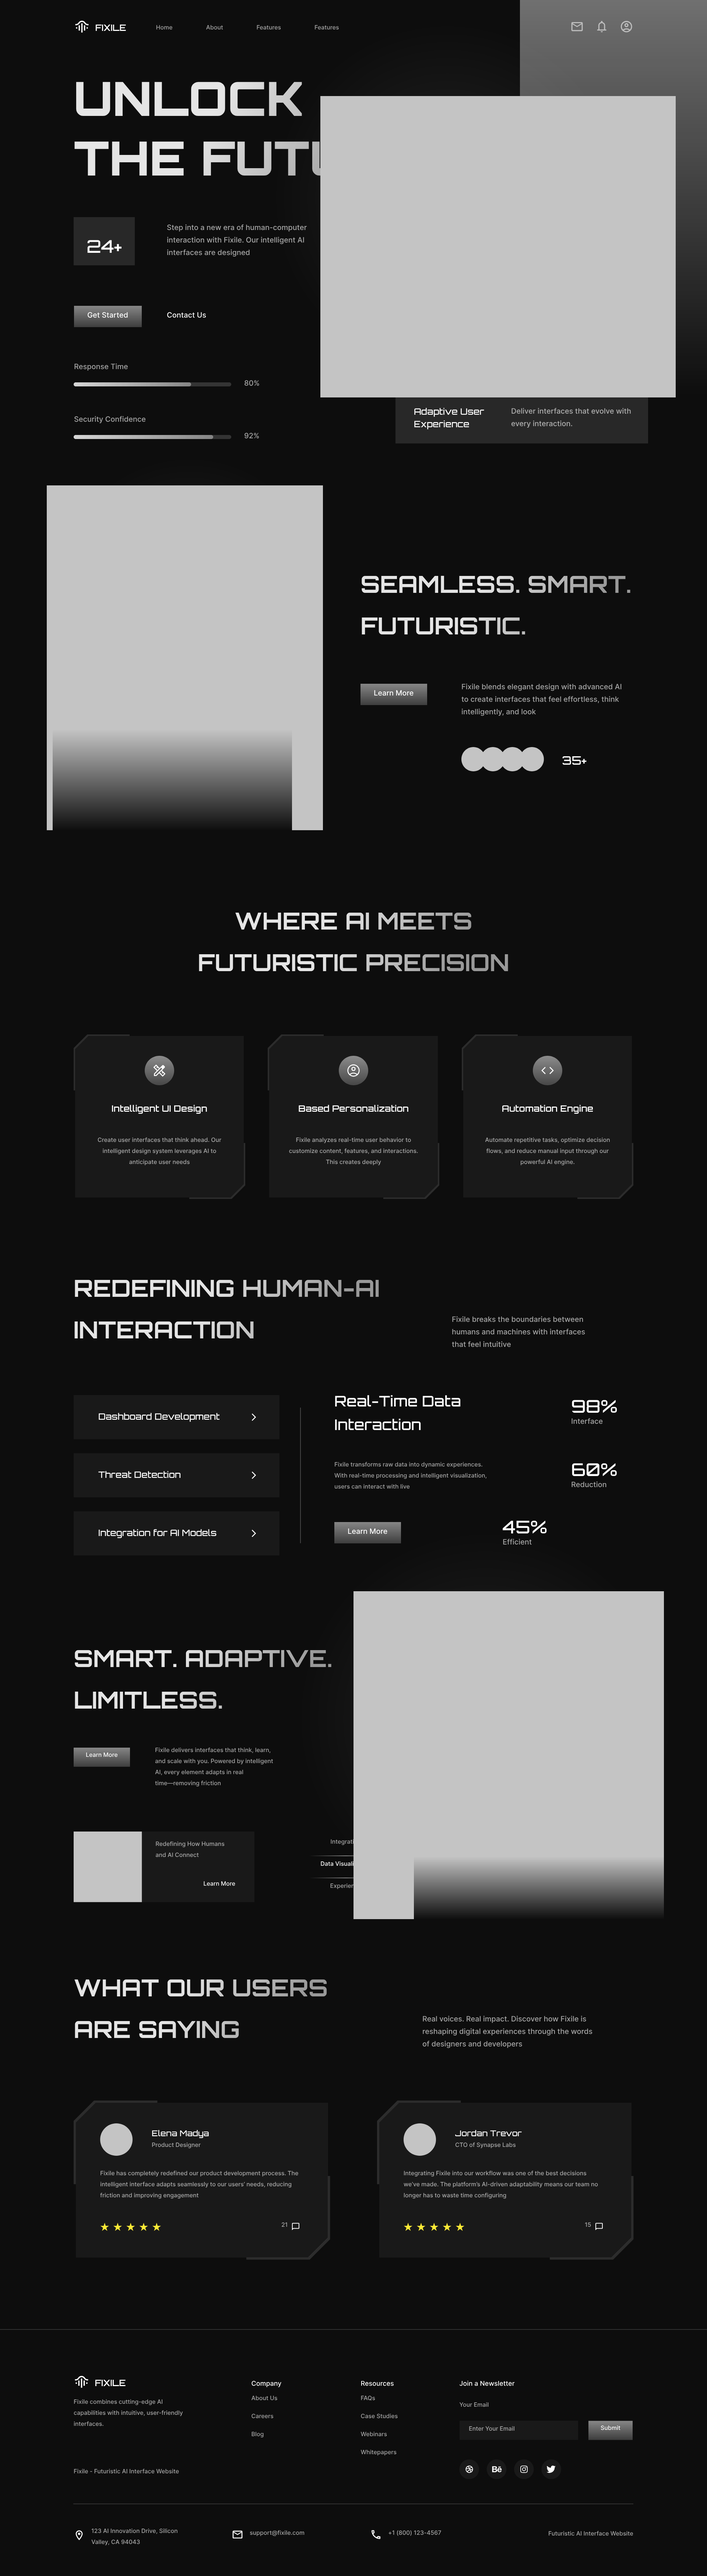
<style>
.page{position:relative;width:707px;height:2576px;background:#0d0d0d}
.page>*{position:absolute;margin:0}
.t1{font:8.8px "Orbitron-SemiBold";color:#ffffff}
.t2{font:5.9px "Inter-Medium";color:#a6a6a6}
.t3{font:47.1px/59.6px "Orbitron-Black";text-transform:uppercase}
.t4{font:7.4px/12.5px "Inter-Medium";color:#a6a6a6}
.t5{font:17.7px "Orbitron-Medium";color:#ffffff}
.t6{font:7.4px "Inter-Medium";color:#ffffff}
.t7{font:7.4px "Inter-Medium";color:#a6a6a6}
.t8{font:8.8px/12.5px "Orbitron-Medium";color:#ffffff}
.t9{font:7.4px/12.5px "Inter-Medium";color:#b0b0b0}
.t10{font:23.6px/41.6px "Orbitron-Bold";text-transform:uppercase}
.t11{font:11.8px "Orbitron-Medium";color:#ffffff}
.t12{font:5.9px/11px "Inter-Medium";color:#aaaaaa}
.t13{font:14.7px/23.6px "Orbitron-Medium";color:#ffffff}
.t14{font:8.8px "Orbitron-Medium";color:#ffffff}
.t15{font:5.9px/11px "Inter-Medium";color:#a6a6a6}
.t16{font:23.6px/41.6px "Orbitron-Bold";color:#e1e1e1;text-transform:uppercase}
.t17{font:5.9px "Inter-Medium";color:#ffffff}
.t18{font:8.1px "Orbitron-Medium";color:#ffffff}
.t19{font:5.9px "Inter-Medium";color:#aaaaaa}
.t20{font:6.6px "Inter-Medium";color:#ffffff}
.t21{font:5.9px/18px "Inter-Medium";color:#a6a6a6}
</style>
<div class="page">
<p class="t1" style="left:95px;top:24px;width:31px;height:7px">FIXILE</p>
<p class="t2" style="left:156px;top:25px;width:16px;height:5px">Home</p>
<p class="t2" style="left:206px;top:25px;width:17px;height:5px">About</p>
<p class="t2" style="left:256px;top:25px;width:25px;height:5px">Features</p>
<p class="t2" style="left:315px;top:25px;width:24px;height:5px">Features</p>
<p class="t3" style="left:74px;top:82px;width:348px;height:94px">Unlock the Future</p>
<p class="t4" style="left:167px;top:224px;width:140px;height:33px">Step into a new era of human-computer interaction with Fixile. Our intelligent AI interfaces are designed</p>
<p class="t5" style="left:87px;top:240px;width:34px;height:13px">24+</p>
<p class="t6" style="left:88px;top:312px;width:40px;height:6px">Get Started</p>
<p class="t6" style="left:167px;top:312px;width:39px;height:6px">Contact Us</p>
<p class="t7" style="left:74px;top:363px;width:54px;height:8px">Response Time</p>
<p class="t7" style="left:244px;top:380px;width:15px;height:6px">80%</p>
<p class="t8" style="left:414px;top:408px;width:70px;height:21px">Adaptive User Experience</p>
<p class="t9" style="left:511px;top:408px;width:119px;height:20px">Deliver interfaces that evolve with every interaction.</p>
<p class="t7" style="left:74px;top:416px;width:72px;height:8px">Security Confidence</p>
<p class="t7" style="left:244px;top:433px;width:15px;height:6px">92%</p>
<p class="t10" style="left:361px;top:576px;width:269px;height:58px">Seamless. Smart. Futuristic.</p>
<p class="t4" style="left:461px;top:683px;width:160px;height:33px">Fixile blends elegant design with advanced AI to create interfaces that feel effortless, think intelligently, and look</p>
<p class="t6" style="left:374px;top:690px;width:39px;height:6px">Learn More</p>
<p class="t11" style="left:562px;top:756px;width:24px;height:9px">35+</p>
<p class="t10" style="left:199px;top:912px;width:309px;height:59px;text-align:center">Where AI Meets Futuristic Precision</p>
<p class="t1" style="left:112px;top:1105px;width:95px;height:9px">Intelligent UI Design</p>
<p class="t1" style="left:298px;top:1105px;width:110px;height:7px">Based Personalization</p>
<p class="t1" style="left:502px;top:1105px;width:90px;height:9px">Automation Engine</p>
<p class="t12" style="left:98px;top:1137px;width:123px;height:28px;text-align:center">Create user interfaces that think ahead. Our intelligent design system leverages AI to anticipate user needs</p>
<p class="t12" style="left:289px;top:1137px;width:129px;height:28px;text-align:center">Fixile analyzes real-time user behavior to customize content, features, and interactions. This creates deeply</p>
<p class="t12" style="left:485px;top:1137px;width:124px;height:28px;text-align:center">Automate repetitive tasks, optimize decision flows, and reduce manual input through our powerful AI engine.</p>
<p class="t10" style="left:74px;top:1280px;width:305px;height:58px">Redefining Human-AI Interaction</p>
<p class="t4" style="left:452px;top:1316px;width:133px;height:31px">Fixile breaks the boundaries between humans and machines with interfaces that feel intuitive</p>
<p class="t13" style="left:335px;top:1395px;width:125px;height:35px">Real-Time Data Interaction</p>
<p class="t5" style="left:572px;top:1400px;width:45px;height:13px">98%</p>
<p class="t14" style="left:99px;top:1413px;width:120px;height:9px">Dashboard Development</p>
<p class="t7" style="left:571px;top:1418px;width:31px;height:6px">Interface</p>
<p class="t15" style="left:334px;top:1462px;width:152px;height:27px">Fixile transforms raw data into dynamic experiences. With real-time processing and intelligent visualization, users can interact with live</p>
<p class="t5" style="left:572px;top:1463px;width:44px;height:13px">60%</p>
<p class="t14" style="left:98px;top:1471px;width:83px;height:7px">Threat Detection</p>
<p class="t7" style="left:571px;top:1481px;width:35px;height:6px">Reduction</p>
<p class="t14" style="left:99px;top:1529px;width:117px;height:9px">Integration for AI Models</p>
<p class="t6" style="left:348px;top:1528px;width:39px;height:6px">Learn More</p>
<p class="t5" style="left:502px;top:1521px;width:44px;height:12px">45%</p>
<p class="t7" style="left:503px;top:1539px;width:28px;height:6px">Efficient</p>
<p class="t16" style="left:75px;top:1650px;width:256px;height:59px">Smart. Adaptive. Limitless.</p>
<p class="t17" style="left:86px;top:1752px;width:31px;height:5px">Learn More</p>
<p class="t15" style="left:155px;top:1747px;width:118px;height:40px">Fixile delivers interfaces that think, learn, and scale with you. Powered by intelligent AI, every element adapts in real time—removing friction</p>
<p class="t12" style="left:156px;top:1841px;width:68px;height:16px">Redefining How Humans and AI Connect</p>
<p class="t2" style="left:330px;top:1839px;width:31px;height:6px">Integration</p>
<p class="t17" style="left:321px;top:1861px;width:50px;height:5px">Data Visualization</p>
<p class="t17" style="left:204px;top:1881px;width:31px;height:5px">Learn More</p>
<p class="t2" style="left:330px;top:1883px;width:31px;height:6px">Experience</p>
<p class="t10" style="left:74px;top:1979px;width:253px;height:59px">What Our Users Are Saying</p>
<p class="t4" style="left:422px;top:2016px;width:170px;height:32px">Real voices. Real impact. Discover how Fixile is reshaping digital experiences through the words of designers and developers</p>
<p class="t18" style="left:152px;top:2130px;width:57px;height:8px">Elena Madya</p>
<p class="t18" style="left:455px;top:2130px;width:66px;height:6px">Jordan Trevor</p>
<p class="t19" style="left:152px;top:2142px;width:49px;height:6px">Product Designer</p>
<p class="t19" style="left:455px;top:2142px;width:61px;height:6px">CTO of Synapse Labs</p>
<p class="t12" style="left:100px;top:2170px;width:198px;height:29px">Fixile has completely redefined our product development process. The intelligent interface adapts seamlessly to our users’ needs, reducing friction and improving engagement</p>
<p class="t12" style="left:403px;top:2170px;width:195px;height:29px">Integrating Fixile into our workflow was one of the best decisions we’ve made. The platform’s AI-driven adaptability means our team no longer has to waste time configuring</p>
<p class="t19" style="left:282px;top:2222px;width:5px;height:5px">21</p>
<p class="t19" style="left:584px;top:2222px;width:7px;height:5px">15</p>
<p class="t1" style="left:95px;top:2379px;width:30px;height:7px">FIXILE</p>
<p class="t20" style="left:251px;top:2381px;width:30px;height:6px">Company</p>
<p class="t20" style="left:361px;top:2381px;width:32px;height:5px">Resources</p>
<p class="t20" style="left:459px;top:2381px;width:55px;height:5px">Join a Newsletter</p>
<p class="t15" style="left:74px;top:2399px;width:109px;height:27px">Fixile combines cutting-edge AI capabilities with intuitive, user-friendly interfaces.</p>
<p class="t21" style="left:251px;top:2396px;width:26px;height:42px">About Us<br>Careers<br>Blog</p>
<p class="t21" style="left:360px;top:2396px;width:37px;height:60px">FAQs<br>Case Studies<br>Webinars<br>Whitepapers</p>
<p class="t2" style="left:459px;top:2402px;width:29px;height:5px">Your Email</p>
<p class="t19" style="left:469px;top:2426px;width:45px;height:5px">Enter Your Email</p>
<p class="t17" style="left:600px;top:2425px;width:20px;height:5px">Submit</p>
<p class="t2" style="left:74px;top:2469px;width:105px;height:5px">Fixile - Futuristic AI Interface Website</p>
<p class="t15" style="left:91px;top:2528px;width:86px;height:17px">123 AI Innovation Drive, Silicon Valley, CA 94043</p>
<p class="t2" style="left:250px;top:2530px;width:54px;height:6px">support@fixile.com</p>
<p class="t2" style="left:388px;top:2530px;width:53px;height:6px">+1 (800) 123-4567</p>
<p class="t2" style="left:548px;top:2531px;width:85px;height:5px">Futuristic AI Interface Website</p>
</div>
